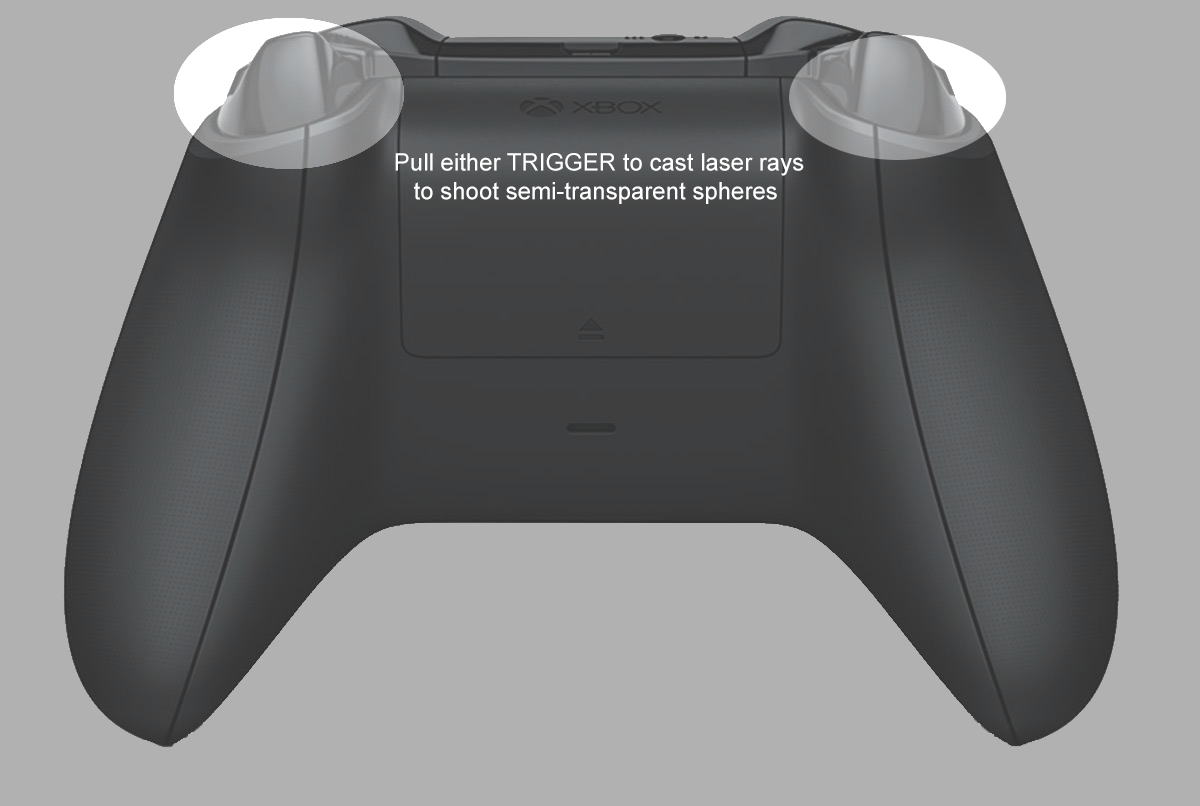
<style>
.page{position:relative;width:1200px;height:806px;background:#b1b1b1}
.page>*{position:absolute;margin:0}
.t1{font:24px "ArialMT";color:#ffffff}
</style>
<div class="page">
<p class="t1" style="left:395px;top:153px;width:409px;height:51px;text-align:center">Pull either TRIGGER to cast laser rays<br>to shoot semi-transparent spheres</p>
</div>
